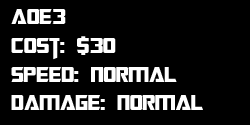
<style>
.page{position:relative;width:250px;height:125px;background:#000000}
.page>*{position:absolute;margin:0}
.t1{font:24px "TransformersMovie";color:#ffffff}
</style>
<div class="page">
<p class="t1" style="left:11px;top:9px;width:192px;height:101px">Aoe3<br>Cost: $30<br>Speed: Normal<br>Damage: Normal</p>
</div>
